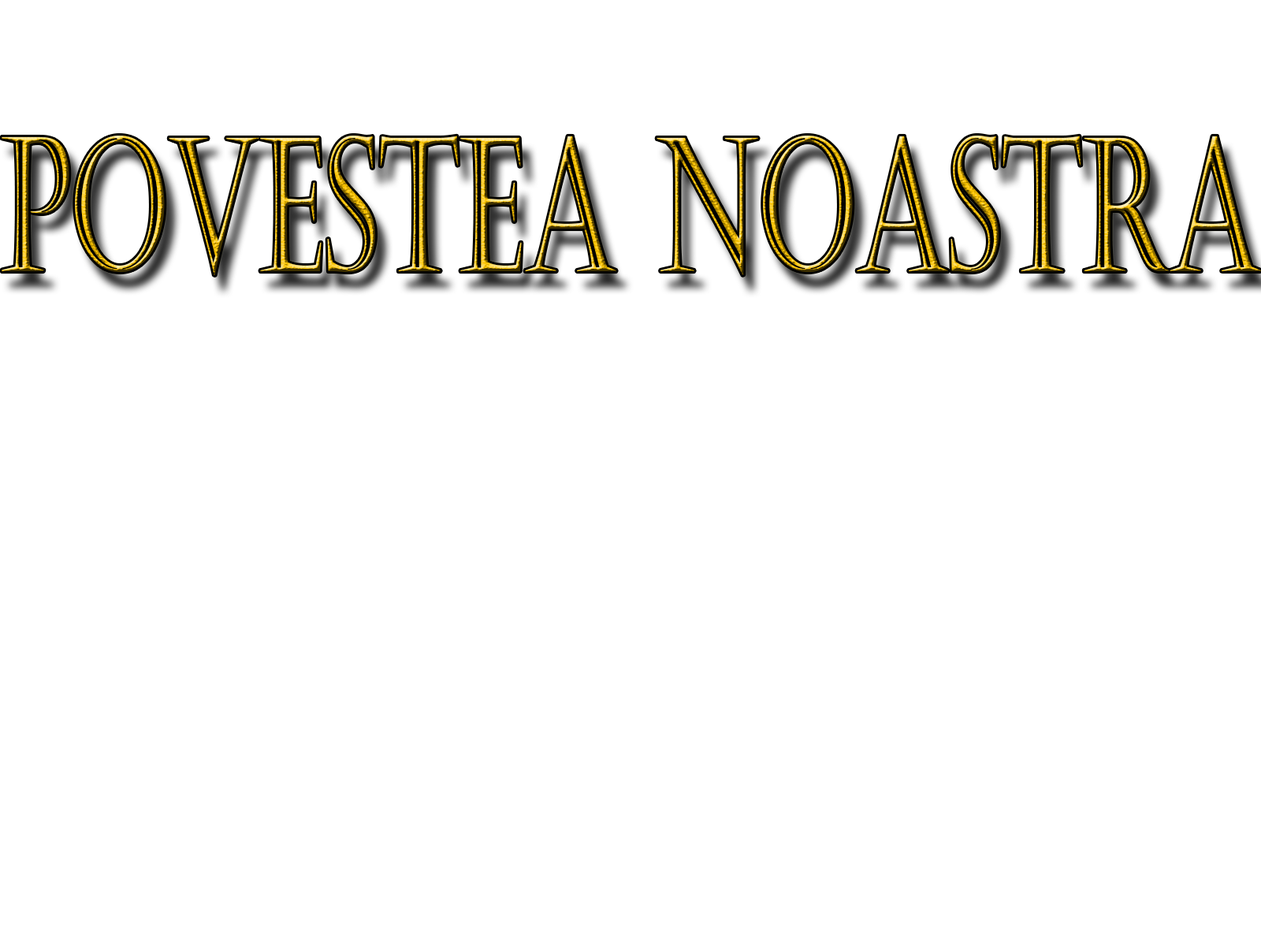
<style>
.page{position:relative;width:1261px;height:946px;background:#ffffff}
.page>*{position:absolute;margin:0}
.t1{font:186.6px "Castellar";scale:0.6 1}
</style>
<div class="page">
<p class="t1" style="left:2px;top:135px;width:1259px;height:140px">Povestea noastra</p>
</div>
